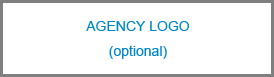
<style>
.page{position:relative;width:274px;height:77px;background:#ffffff}
.page>*{position:absolute;margin:0}
.t1{font:14px/25px "ArialMT";color:#0088cc}
</style>
<div class="page">
<p class="t1" style="left:86px;top:21px;width:104px;height:38px;text-align:center">AGENCY LOGO<br>(optional)</p>
</div>
